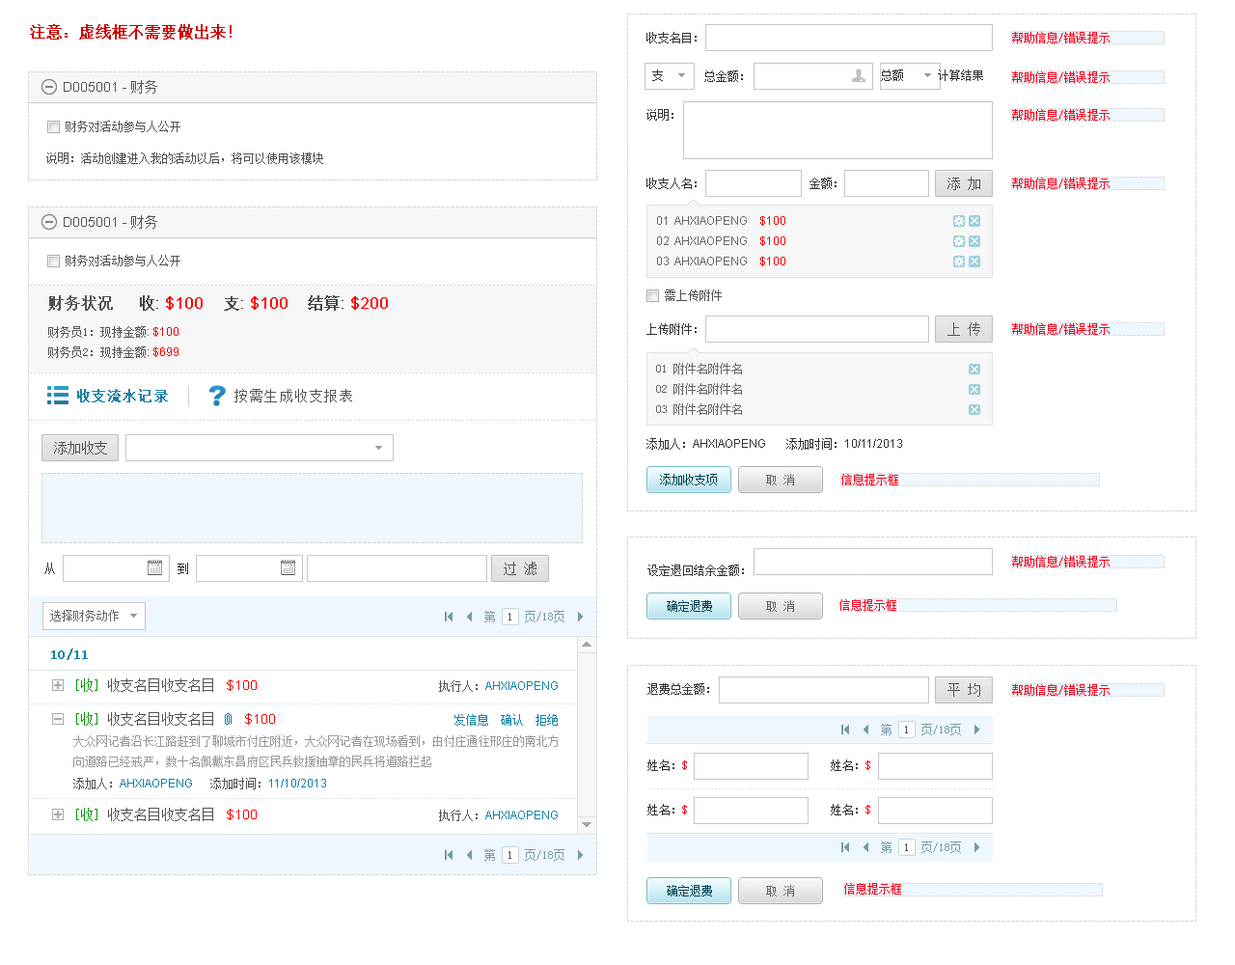
<style>
.page{position:relative;width:1235px;height:965px;background:#ffffff}
.page>*{position:absolute;margin:0}
.t1{font:15.4px "SimSun";color:#cc0000;font-weight:bold}
.t2{font:11.6px "SimSun";color:#333333}
.t3{font:13.5px "ArialMT";color:#525252}
.t4{font:13.5px "SimSun";color:#525252}
.t5{font:11.6px "SimSun";color:#525252}
.t6{font:11.6px/20.3px "ArialMT";color:#666666}
.t7{font:11.6px/20.3px "ArialMT";color:#ff0000}
.t8{font:15.4px "SimSun";color:#525252;font-weight:bold}
.t9{font:15.4px "ArialMT";color:#ff0000;font-weight:bold}
.t10{font:15.4px "SimSun";color:#464646;font-weight:bold}
.t11{font:15.4px "ArialMT";color:#464646;font-weight:bold}
.t12{font:15.4px "STHeitiSC-Light";color:#464646;font-weight:bold}
.t13{font:11.6px/20.3px "SimSun";color:#525252}
.t14{font:11.6px/20.3px "ArialMT";color:#464646}
.t15{font:14.3px "SimSun";letter-spacing:0.05em;color:#137fa5;font-weight:bold}
.t16{font:14.3px "SimSun";letter-spacing:0.05em;color:#525252}
.t17{font:11.6px "ArialMT";color:#333333}
.t18{font:13.5px "SimSun";color:#147fa5;font-weight:bold}
.t19{font:13.5px "SimSun";color:#009900}
.t20{font:13.5px "ArialMT";color:#ff0000}
.t21{font:11.6px "ArialMT";color:#137fa5}
.t22{font:11.6px "SimSun";color:#137fa5}
.t23{font:11.6px/20.3px "SimSun";color:#999999}
.t24{font:11.6px "SimSun";color:#ff0019}
</style>
<div class="page">
<p class="t1" style="left:30px;top:24px;width:202px;height:16px">注意：虚线框不需要做出来！</p>
<p class="t2" style="left:647px;top:32px;width:50px;height:11px">收支名目：</p>
<p class="t2" style="left:652px;top:69px;width:11px;height:12px">支</p>
<p class="t2" style="left:705px;top:70px;width:38px;height:12px">总金额：</p>
<p class="t2" style="left:881px;top:69px;width:22px;height:12px">总额</p>
<p class="t2" style="left:938px;top:69px;width:46px;height:12px">计算结果</p>
<p class="t3" style="left:64px;top:80px;width:93px;height:14px">D005001 - <span class="t4">财务</span></p>
<p class="t2" style="left:647px;top:109px;width:27px;height:12px">说明：</p>
<p class="t5" style="left:66px;top:121px;width:114px;height:11px">财务对活动参与人公开</p>
<p class="t5" style="left:46px;top:152px;width:277px;height:12px">说明：活动创建进入我的活动以后，将可以使用该模块</p>
<p class="t2" style="left:647px;top:178px;width:50px;height:11px">收支人名：</p>
<p class="t2" style="left:810px;top:178px;width:27px;height:11px">金额：</p>
<p class="t3" style="left:64px;top:215px;width:93px;height:14px">D005001 - <span class="t4">财务</span></p>
<p class="t6" style="left:657px;top:216px;width:129px;height:50px">01  AHXIAOPENG    <span class="t7">$100<br></span>02  AHXIAOPENG    <span class="t7">$100<br></span>03  AHXIAOPENG    <span class="t7">$100</span></p>
<p class="t5" style="left:66px;top:255px;width:114px;height:11px">财务对活动参与人公开</p>
<p class="t5" style="left:665px;top:290px;width:57px;height:11px">需上传附件</p>
<p class="t8" style="left:48px;top:295px;width:65px;height:16px">财务状况</p>
<p class="t9" style="left:140px;top:295px;width:63px;height:16px"><span class="t10">收</span><span class="t11">: </span>$100</p>
<p class="t9" style="left:224px;top:296px;width:64px;height:15px"><span class="t12">支</span><span class="t11">: </span>$100</p>
<p class="t9" style="left:308px;top:295px;width:80px;height:16px"><span class="t10">结算</span><span class="t11">: </span>$200</p>
<p class="t13" style="left:48px;top:326px;width:131px;height:32px">财务员1：现持金额<span class="t14">: </span><span class="t7">$100 <br></span>财务员2：现持金额<span class="t14">: </span><span class="t7">$699</span></p>
<p class="t2" style="left:647px;top:323px;width:50px;height:12px">上传附件：</p>
<p class="t15" style="left:77px;top:389px;width:91px;height:13px">收支流水记录</p>
<p class="t16" style="left:235px;top:389px;width:117px;height:13px">按需生成收支报表</p>
<p class="t17" style="left:647px;top:438px;width:255px;height:12px"><span class="t2">添加人：</span>AHXIAOPENG       <span class="t2">添加时间：</span>10/11/2013</p>
<p class="t2" style="left:648px;top:565px;width:96px;height:11px">设定退回结余金额：</p>
<p class="t18" style="left:51px;top:649px;width:37px;height:11px">10/11</p>
<p class="t4" style="left:76px;top:679px;width:137px;height:13px"><span class="t19">[收] </span>收支名目收支名目</p>
<p class="t20" style="left:227px;top:679px;width:30px;height:12px">$100</p>
<p class="t21" style="left:439px;top:680px;width:119px;height:12px"><span class="t5">执行人：</span>AHXIAOPENG</p>
<p class="t2" style="left:648px;top:683px;width:61px;height:12px">退费总金额：</p>
<p class="t4" style="left:76px;top:712px;width:137px;height:14px"><span class="t19">[收] </span>收支名目收支名目</p>
<p class="t20" style="left:245px;top:713px;width:30px;height:12px">$100</p>
<p class="t22" style="left:455px;top:714px;width:103px;height:12px">发信息  确认  拒绝</p>
<p class="t23" style="left:73px;top:735px;width:486px;height:32px">大众网记者沿长江路赶到了聊城市付庄附近，大众网记者在现场看到，由付庄通往邢庄的南北方向道路已经戒严，数十名佩戴东昌府区民兵救援袖章的民兵将道路拦起</p>
<p class="t2" style="left:648px;top:760px;width:39px;height:11px">姓名：<span class="t24">$</span></p>
<p class="t2" style="left:831px;top:760px;width:40px;height:11px">姓名：<span class="t24">$</span></p>
<p class="t21" style="left:73px;top:778px;width:253px;height:12px"><span class="t5">添加人：</span>AHXIAOPENG      <span class="t5">添加时间：</span>11/10/2013</p>
<p class="t4" style="left:76px;top:808px;width:137px;height:13px"><span class="t19">[收] </span>收支名目收支名目</p>
<p class="t20" style="left:227px;top:809px;width:30px;height:11px">$100</p>
<p class="t21" style="left:439px;top:810px;width:119px;height:11px"><span class="t5">执行人：</span>AHXIAOPENG</p>
<p class="t2" style="left:648px;top:804px;width:39px;height:12px">姓名：<span class="t24">$</span></p>
<p class="t2" style="left:831px;top:804px;width:40px;height:12px">姓名：<span class="t24">$</span></p>
</div>
